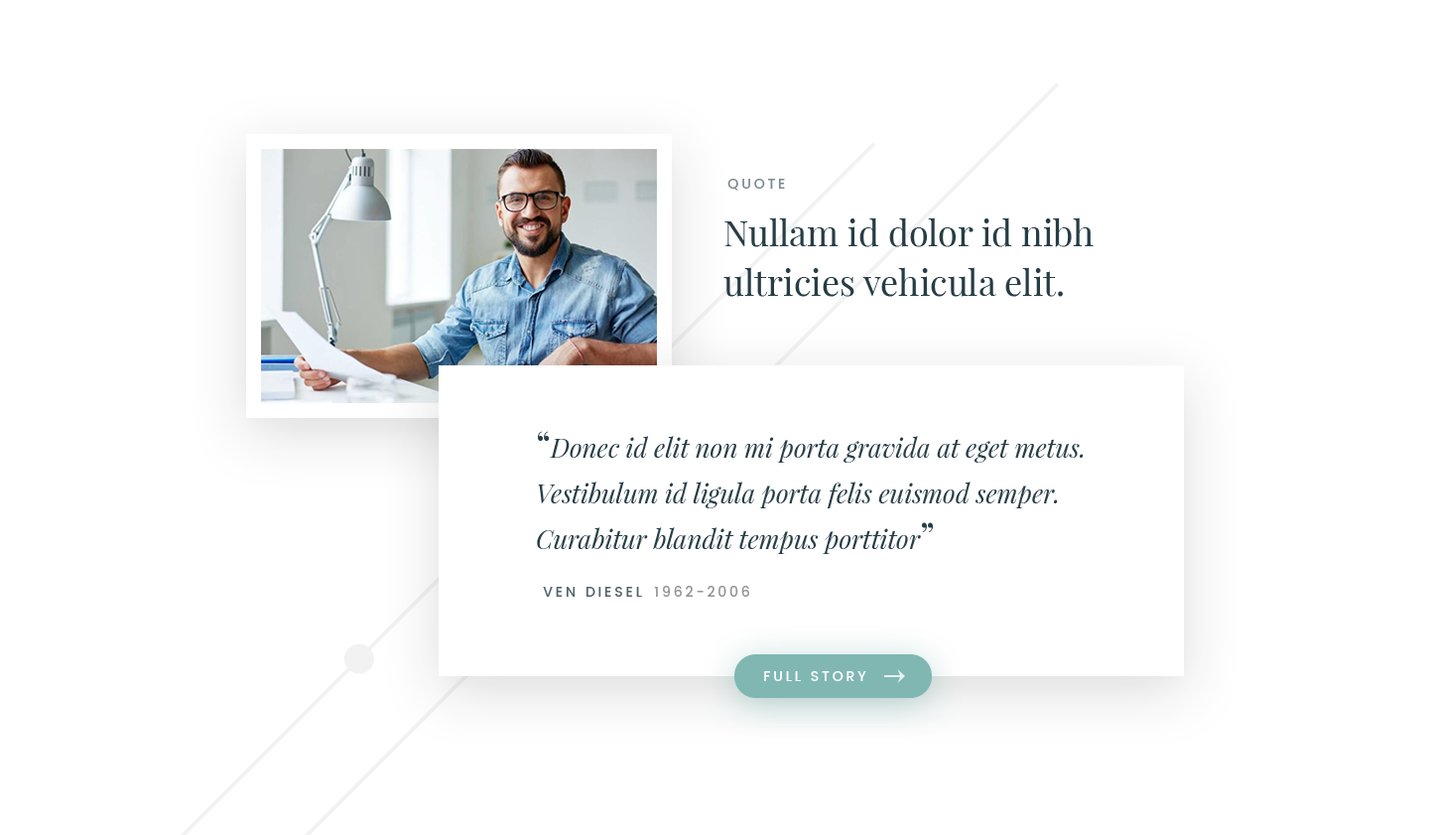
<style>
.page{position:relative;width:1429px;height:835px;background:#ffffff}
.page>*{position:absolute;margin:0}
.t1{font:13.9px "Poppins-Medium";letter-spacing:0.2em;color:#7d8b90;text-transform:uppercase}
.t2{font:35.7px/49.6px "PlayfairDisplay-Regular";color:#273d46}
.t3{font:25.8px/45.6px "PlayfairDisplay-Italic";color:#273d46}
.t4{font:35.7px/45.6px "PlayfairDisplay-Regular";color:#273d46}
.t5{font:13.9px "Poppins-Medium";letter-spacing:0.2em;color:#52646b;text-transform:uppercase}
.t6{font:13.9px "Poppins-Medium";letter-spacing:0.2em;color:#959596;text-transform:uppercase}
.t7{font:13.9px "Poppins-Medium";letter-spacing:0.2em;color:#ffffff;text-transform:uppercase}
</style>
<div class="page">
<p class="t1" style="left:727px;top:179px;width:58px;height:12px">Quote</p>
<p class="t2" style="left:723px;top:217px;width:371px;height:80px">Nullam id dolor id nibh ultricies vehicula elit.</p>
<p class="t3" style="left:537px;top:431px;width:547px;height:123px"><span class="t4">“</span>Donec id elit non mi porta gravida at eget metus. Vestibulum id ligula porta felis euismod semper. Curabitur blandit tempus porttitor<span class="t4">”</span></p>
<p class="t5" style="left:543px;top:586px;width:99px;height:10px">VEN diesel</p>
<p class="t6" style="left:654px;top:585px;width:95px;height:11px">1962-2006</p>
<p class="t7" style="left:764px;top:671px;width:102px;height:10px">Full Story</p>
</div>
